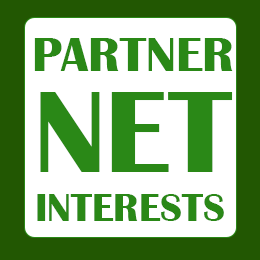
<style>
.page{position:relative;width:260px;height:260px;background:#ffffff}
.page>*{position:absolute;margin:0}
.t1{font:50px "BritannicBold";color:#2a8817}
.t2{font:120px "BritannicBold";color:#2a8817}
.t3{font:40px "BritannicBold";color:#2a8817}
</style>
<div class="page">
<p class="t1" style="left:34px;top:38px;width:199px;height:33px">PARTNER</p>
<p class="t2" style="left:40px;top:92px;width:193px;height:80px">NET</p>
<p class="t3" style="left:37px;top:194px;width:187px;height:27px">INTERESTS</p>
</div>
